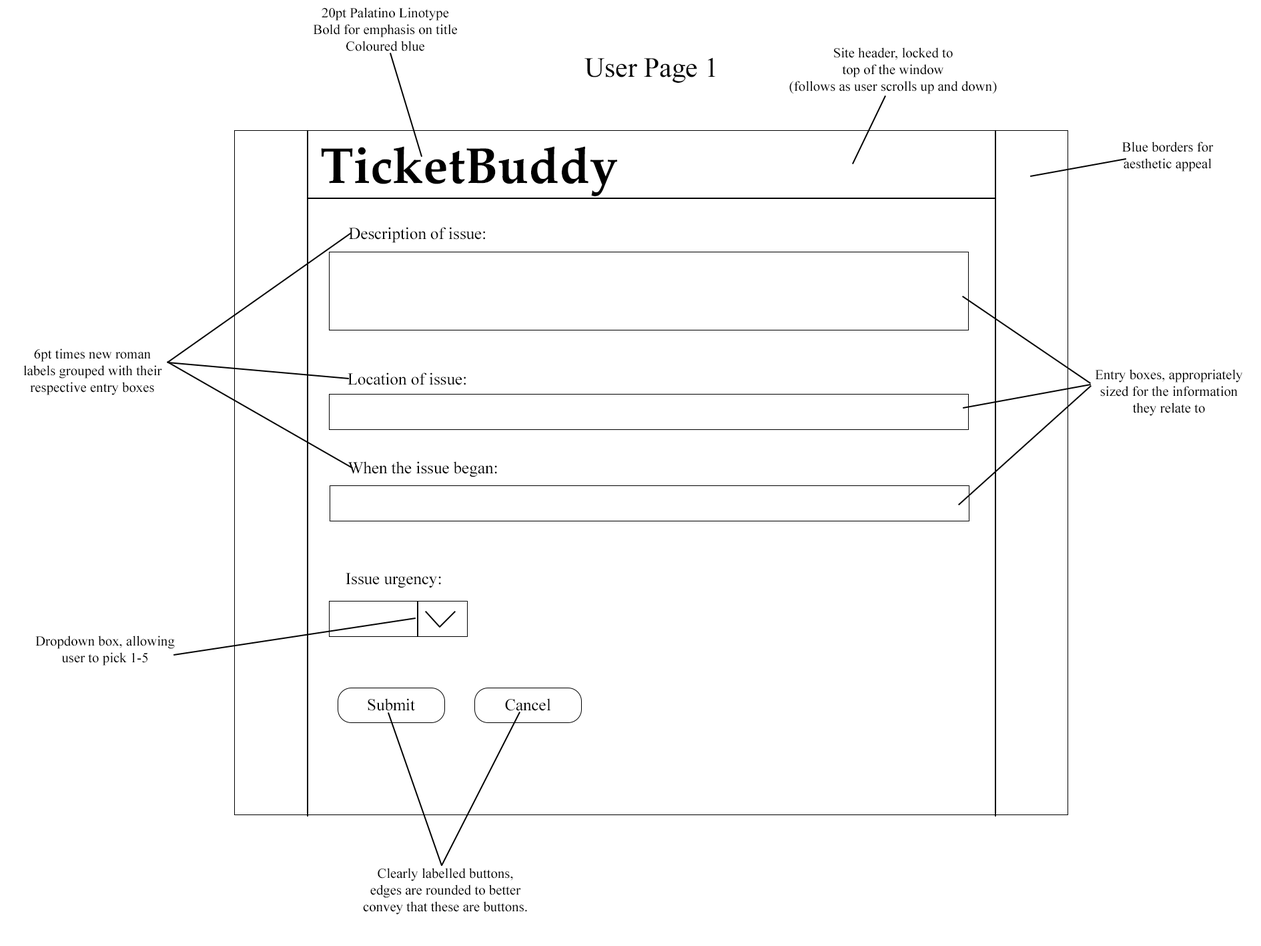
<style>
.page{position:relative;width:1261px;height:946px;background:#ffffff}
.page>*{position:absolute;margin:0}
.t1{font:13.9px "TimesNewRomanPSMT";color:#000000}
.t2{font:27.8px "TimesNewRomanPSMT";color:#000000}
.t3{font:50px "PalatinoLinotype-Bold";color:#000000}
.t4{font:16.7px "TimesNewRomanPSMT";color:#000000}
</style>
<div class="page">
<p class="t1" style="left:313px;top:7px;width:144px;height:44px;text-align:center">20pt Palatino Linotype<br>Bold for emphasis on title<br>Coloured blue</p>
<p class="t1" style="left:789px;top:47px;width:208px;height:47px;text-align:center">Site header, locked to<br>top of the window<br>(follows as user scrolls up and down)</p>
<p class="t2" style="left:585px;top:57px;width:130px;height:26px">User Page 1</p>
<p class="t3" style="left:321px;top:146px;width:296px;height:50px">TicketBuddy</p>
<p class="t1" style="left:1122px;top:141px;width:92px;height:30px;text-align:center">Blue borders for aesthetic appeal</p>
<p class="t4" style="left:349px;top:227px;width:136px;height:16px">Description of issue:</p>
<p class="t1" style="left:23px;top:348px;width:139px;height:47px;text-align:center">6pt times new roman<br>labels grouped with their<br>respective entry boxes</p>
<p class="t4" style="left:348px;top:372px;width:118px;height:13px">Location of issue:</p>
<p class="t1" style="left:1095px;top:369px;width:148px;height:47px;text-align:center">Entry boxes, appropriately<br>sized for the information<br>they relate to</p>
<p class="t4" style="left:348px;top:461px;width:149px;height:16px">When the issue began:</p>
<p class="t4" style="left:346px;top:573px;width:95px;height:15px">Issue urgency:</p>
<p class="t1" style="left:35px;top:635px;width:140px;height:30px;text-align:center">Dropdown box, allowing<br>user to pick 1-5</p>
<p class="t4" style="left:368px;top:698px;width:47px;height:13px">Submit</p>
<p class="t4" style="left:505px;top:698px;width:46px;height:13px">Cancel</p>
<p class="t1" style="left:363px;top:867px;width:164px;height:47px;text-align:center">Clearly labelled buttons,<br>edges are rounded to better<br>convey that these are buttons.</p>
</div>
